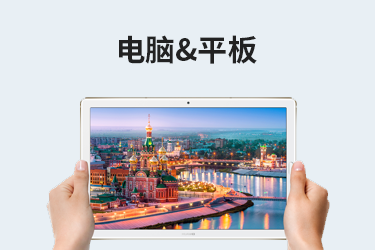
<style>
.page{position:relative;width:375px;height:250px;background:#e8eff4}
.page>*{position:absolute;margin:0}
.t1{font:30px "SourceHanSansCN-Bold";color:#222222}
</style>
<div class="page">
<p class="t1" style="left:119px;top:35px;width:138px;height:29px">电脑&amp;平板</p>
</div>
